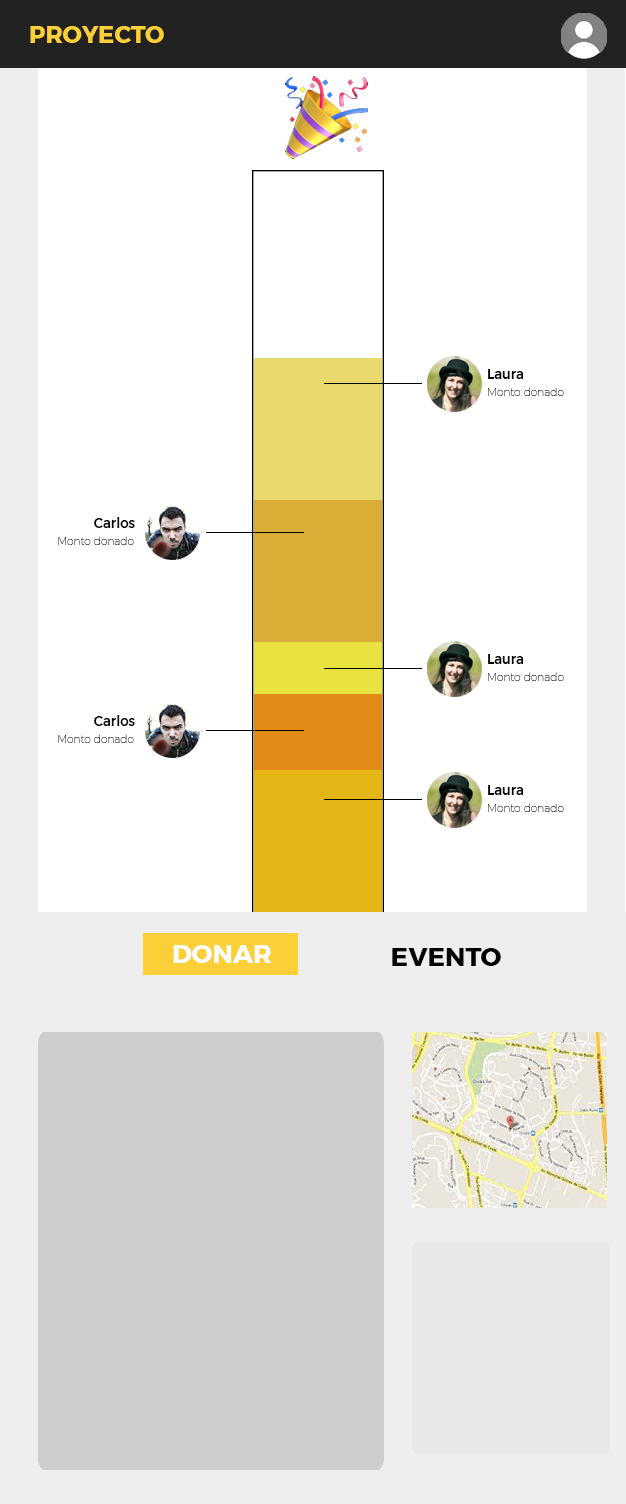
<style>
.page{position:relative;width:626px;height:1504px;background:#ffffff}
.page>*{position:absolute;margin:0}
.t1{font:24px "Montserrat-Bold";color:#facf38}
.t2{font:13.3px "Montserrat-Medium";color:#000000}
.t3{font:10.7px "Montserrat-Thin"}
.t4{font:10.7px "Montserrat-Thin";color:#000000}
.t5{font:26px "Montserrat-Bold";color:#ffffff}
.t6{font:26px "Montserrat-Bold";color:#000000}
</style>
<div class="page">
<p class="t1" style="left:30px;top:26px;width:134px;height:17px">PROYECTO</p>
<p class="t2" style="left:488px;top:369px;width:36px;height:10px">Laura</p>
<p class="t3" style="left:488px;top:387px;width:76px;height:9px">Monto donado</p>
<p class="t2" style="left:94px;top:517px;width:41px;height:11px">Carlos</p>
<p class="t4" style="left:58px;top:536px;width:76px;height:9px">Monto donado</p>
<p class="t2" style="left:488px;top:654px;width:36px;height:10px">Laura</p>
<p class="t3" style="left:488px;top:672px;width:76px;height:9px">Monto donado</p>
<p class="t2" style="left:94px;top:715px;width:41px;height:11px">Carlos</p>
<p class="t4" style="left:58px;top:734px;width:76px;height:9px">Monto donado</p>
<p class="t2" style="left:488px;top:785px;width:36px;height:10px">Laura</p>
<p class="t3" style="left:488px;top:803px;width:76px;height:9px">Monto donado</p>
<p class="t5" style="left:173px;top:945px;width:99px;height:18px">DONAR</p>
<p class="t6" style="left:392px;top:948px;width:109px;height:18px">EVENTO</p>
</div>
